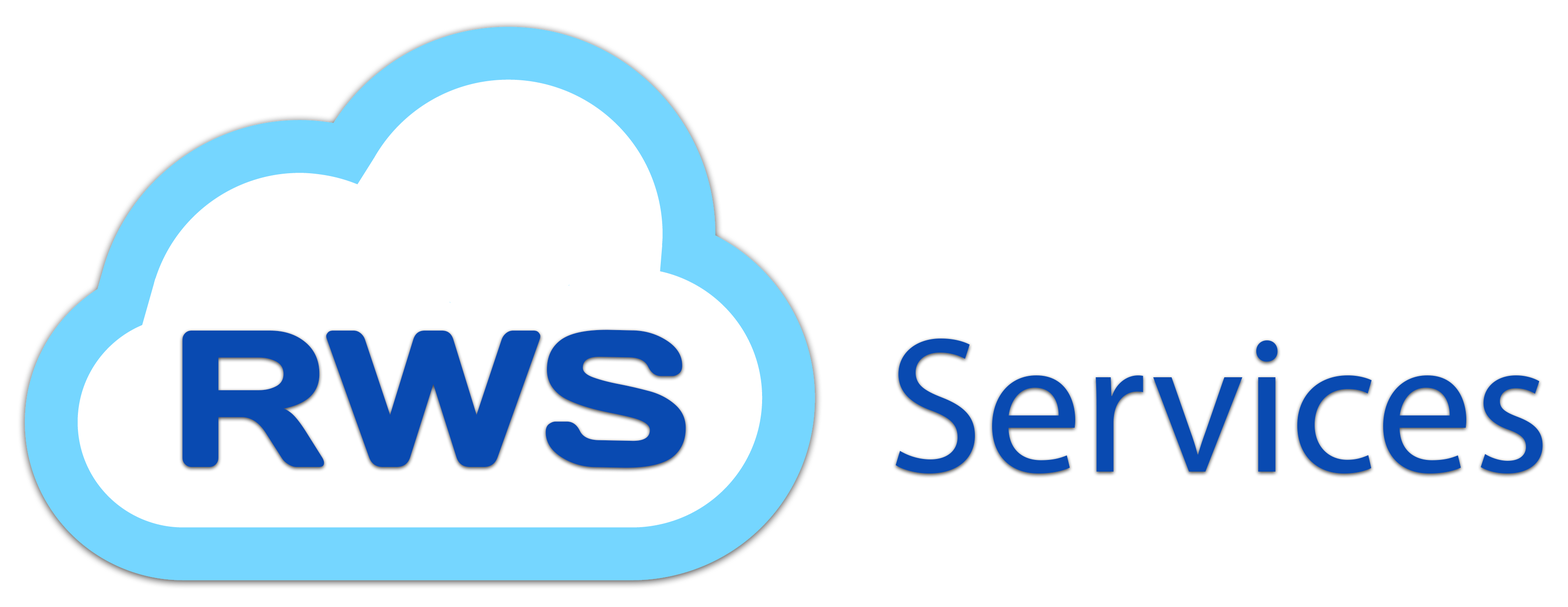
<style>
.page{position:relative;width:1568px;height:607px;background:#ffffff}
.page>*{position:absolute;margin:0}
.t1{font:194.4px "DaysOne-Regular";color:#094ab1}
.t2{font:194.4px "MyriadPro-Regular";color:#094ab1}
</style>
<div class="page">
<p class="t1" style="left:182px;top:329px;width:504px;height:139px">RWS</p>
<p class="t2" style="left:896px;top:338px;width:647px;height:136px">Services</p>
</div>
